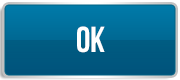
<style>
.page{position:relative;width:180px;height:80px}
.page>*{position:absolute;margin:0}
.t1{font:36px "UTM-Bebas";color:#ffffff}
</style>
<div class="page">
<p class="t1" style="left:77px;top:26px;width:28px;height:27px">OK</p>
</div>
